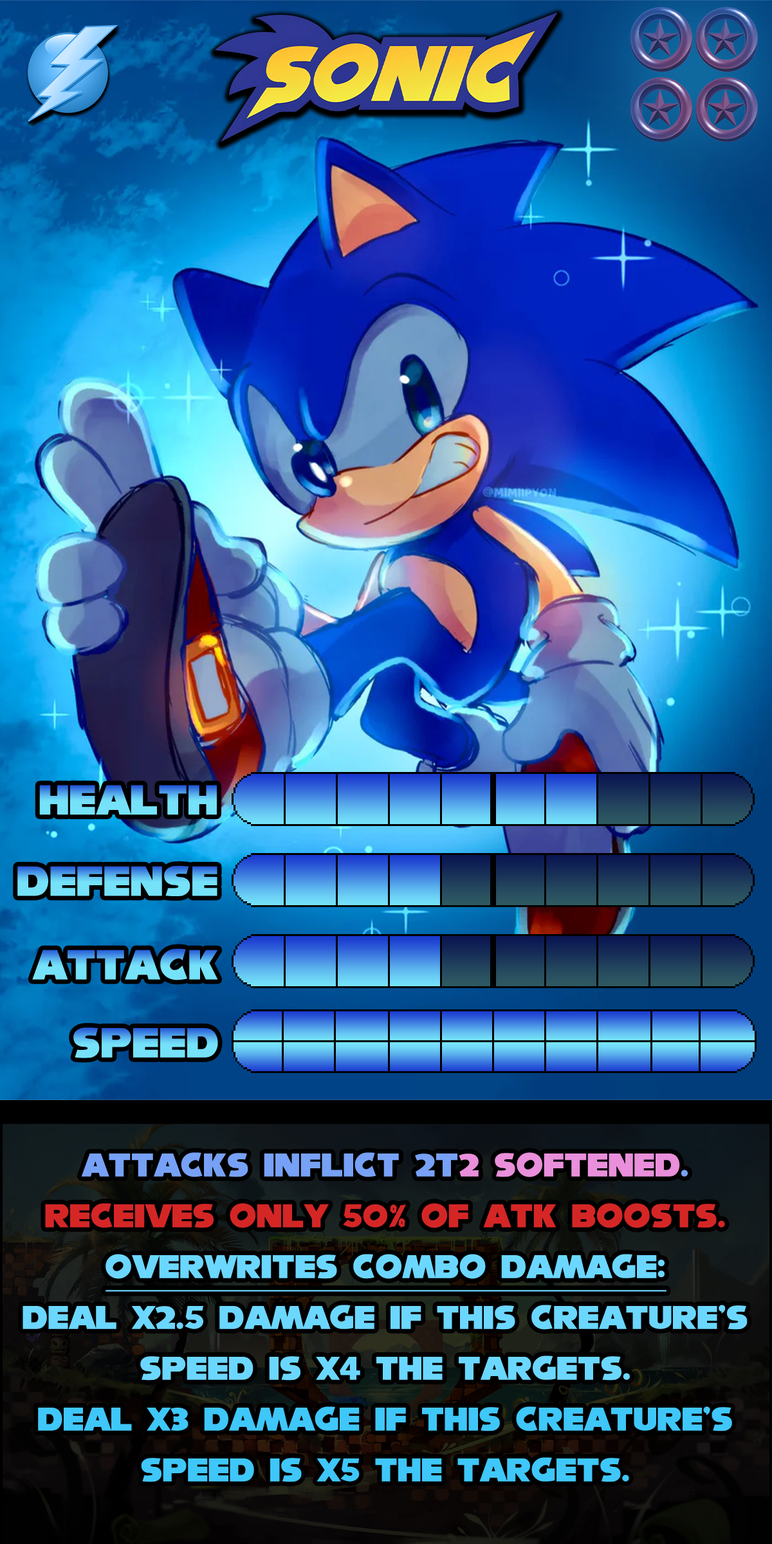
<style>
.page{position:relative;width:772px;height:1544px}
.page>*{position:absolute;margin:0}
.t1{font:64.3px "NiseSegaSonic"}
.t2{font:50.2px/50.8px "NiseSegaSonic";color:#6bd7ff}
.t3{font:50.2px/50.8px "NiseSegaSonic";color:#77a1f6}
.t4{font:50.2px/50.8px "NiseSegaSonic";color:#e98fdb}
.t5{font:50.2px/50.8px "NiseSegaSonic";color:#d52626}
.t6{font:50.2px/50.8px "SuperMarioGalaxy";color:#d52626}
.t7{font:50.2px/50.8px "NiseSegaSonic";color:#6bd7ff;text-decoration:underline}
.t8{font:50.2px/50.8px "NiseSegaSonic";color:#3fc7fa}
</style>
<div class="page">
<p class="t1" style="left:39px;top:785px;width:178px;height:30px">Health</p>
<p class="t1" style="left:17px;top:865px;width:200px;height:31px">Defense</p>
<p class="t1" style="left:32px;top:948px;width:186px;height:33px">Attack</p>
<p class="t1" style="left:73px;top:1028px;width:145px;height:30px">Speed</p>
<p class="t2" style="left:23px;top:1152px;width:725px;height:331px;text-align:center"><span class="t3">Attacks inflict 2T</span><span class="t4">2 Softened</span><span class="t3">.<br></span><span class="t5">Receives only 50</span><span class="t6">%</span><span class="t5"> of atk boosts.<br></span><span class="t7">Overwrites combo damage:<br></span>Deal x2.5 damage if this creature's speed is x4 the targets.<br><span class="t8">Deal x3 damage if this creature's speed is x5 the targets.</span></p>
</div>
